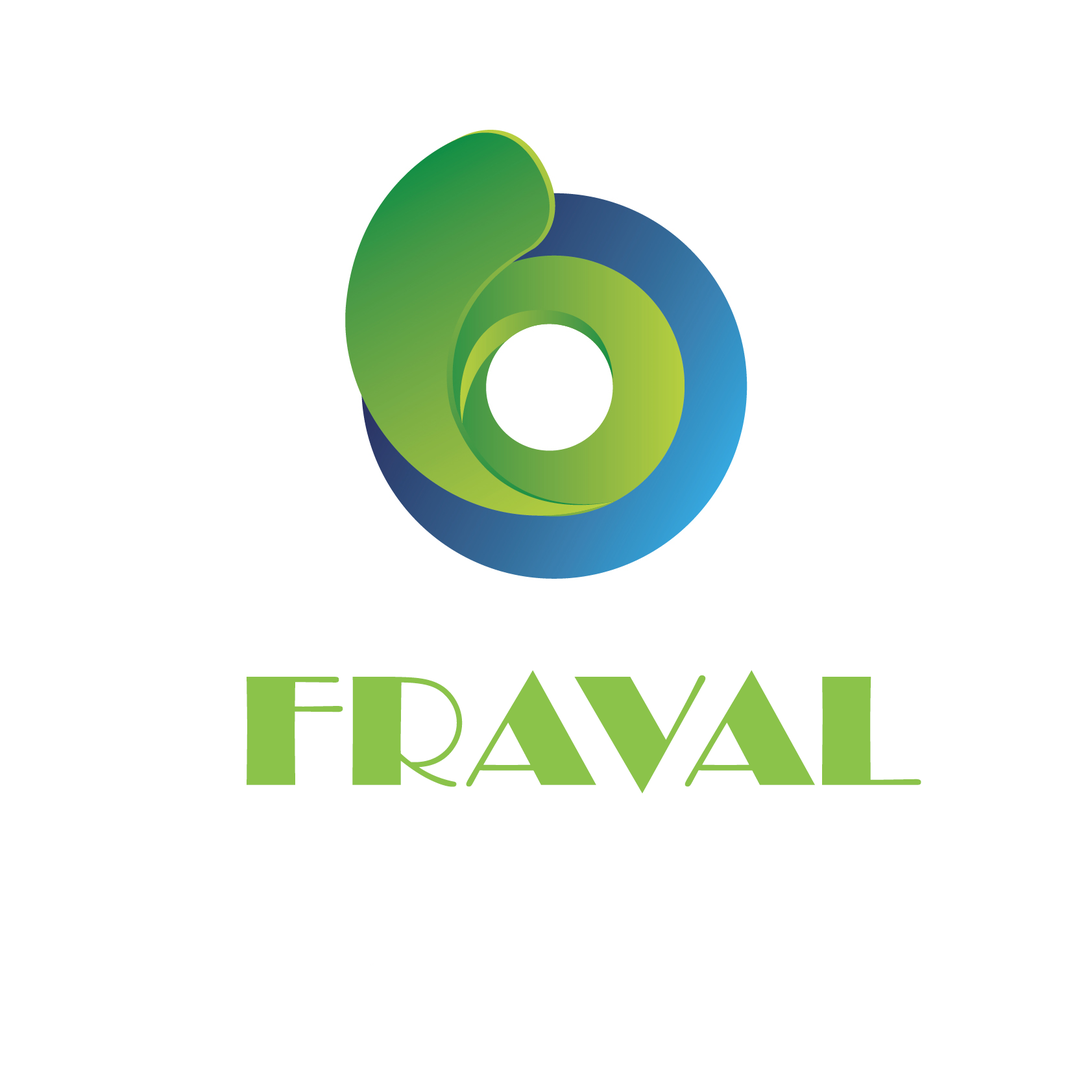
<style>
.page{position:relative;width:1092px;height:1092px;background:#ffffff}
.page>*{position:absolute;margin:0}
.t1{font:162.2px "Broadway";color:#8bc34a}
</style>
<div class="page">
<p class="t1" style="left:247px;top:670px;width:674px;height:124px">FRAVAL</p>
</div>
